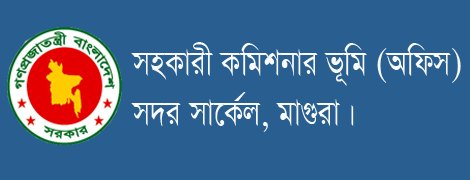
<style>
.page{position:relative;width:470px;height:180px;background:#295e90}
.page>*{position:absolute;margin:0}
.t1{font:41.6px "SutonnyMJ";color:#f9fafb;scale:0.81 1}
</style>
<div class="page">
<p class="t1" style="left:131px;top:42px;width:330px;height:90px">mnKvix Kwgkbvi f~wg (Awdm)<br>m`i mv‡K©j, gv¸iv|</p>
</div>
